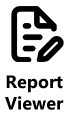
<style>
.page{position:relative;width:68px;height:131px;background:#ffffff}
.page>*{position:absolute;margin:0}
.t1{font:18px "MicrosoftTaiLe-Bold";color:#000000}
</style>
<div class="page">
<p class="t1" style="left:5px;top:75px;width:59px;height:35px;text-align:center">Report<br>Viewer</p>
</div>
